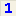
<style>
.page{position:relative;width:16px;height:16px;background:#f5f1e3}
.page>*{position:absolute;margin:0}
.t1{font:16px "Consolas-Bold";color:#ffffff}
</style>
<div class="page">
<p class="t1" style="left:5px;top:3px;width:7px;height:10px">1</p>
</div>
